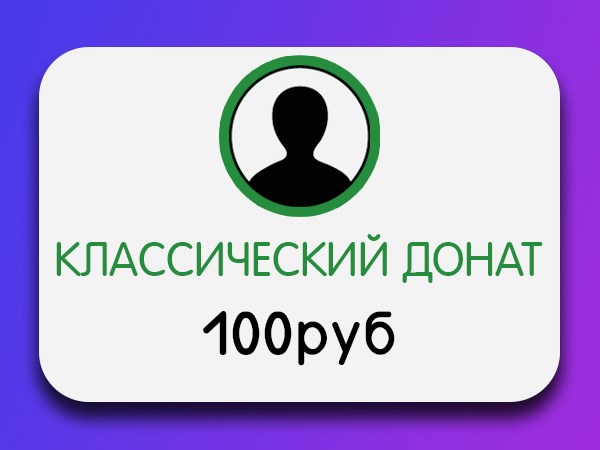
<style>
.page{position:relative;width:600px;height:450px;background:#f3f3f3}
.page>*{position:absolute;margin:0}
.t1{font:46.2px "AFuturaRound";color:#268d3e}
.t2{font:72px "GOST2600885";color:#000000}
</style>
<div class="page">
<p class="t1" style="left:56px;top:234px;width:487px;height:49px">КЛАССИЧЕСКИЙ ДОНАТ</p>
<p class="t2" style="left:203px;top:311px;width:192px;height:55px">100руб</p>
</div>
